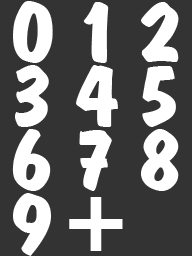
<style>
.page{position:relative;width:192px;height:256px;background:#333333}
.page>*{position:absolute;margin:0}
.t1{font:91.3px "UVNDaLatBold";color:#ffffff}
</style>
<div class="page">
<p class="t1" style="left:13px;top:1px;width:40px;height:62px">0</p>
<p class="t1" style="left:83px;top:2px;width:26px;height:61px">1</p>
<p class="t1" style="left:141px;top:2px;width:38px;height:60px">2</p>
<p class="t1" style="left:15px;top:65px;width:34px;height:62px">3</p>
<p class="t1" style="left:76px;top:65px;width:42px;height:62px">4</p>
<p class="t1" style="left:142px;top:66px;width:34px;height:61px">5</p>
<p class="t1" style="left:12px;top:129px;width:39px;height:62px">6</p>
<p class="t1" style="left:79px;top:130px;width:33px;height:61px">7</p>
<p class="t1" style="left:141px;top:129px;width:38px;height:62px">8</p>
<p class="t1" style="left:13px;top:193px;width:38px;height:63px">9</p>
<p class="t1" style="left:69px;top:197px;width:54px;height:54px">+</p>
</div>
